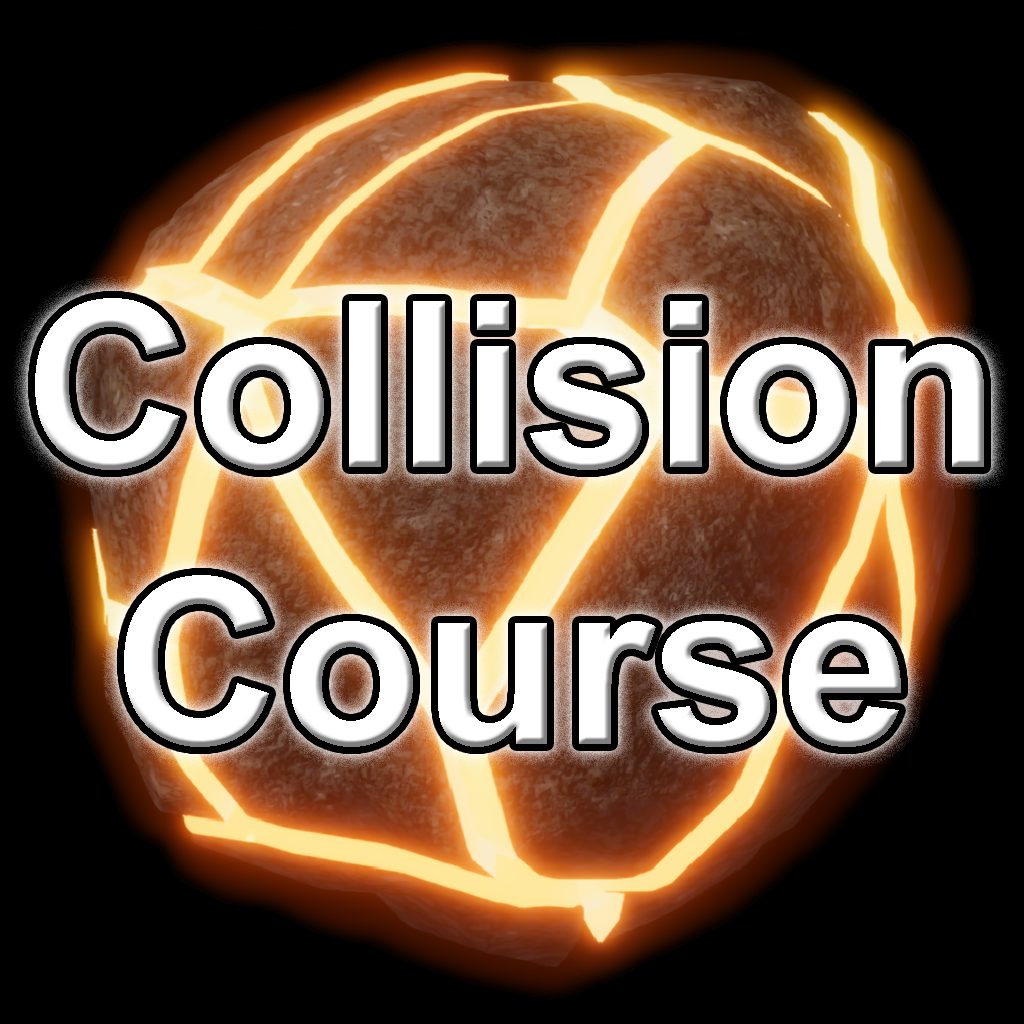
<style>
.page{position:relative;width:1024px;height:1024px;background:#000000}
.page>*{position:absolute;margin:0}
.t1{font:231px "Arial-BoldMT";color:#ffffff}
</style>
<div class="page">
<p class="t1" style="left:35px;top:298px;width:949px;height:449px;text-align:center">Collision<br>Course</p>
</div>
